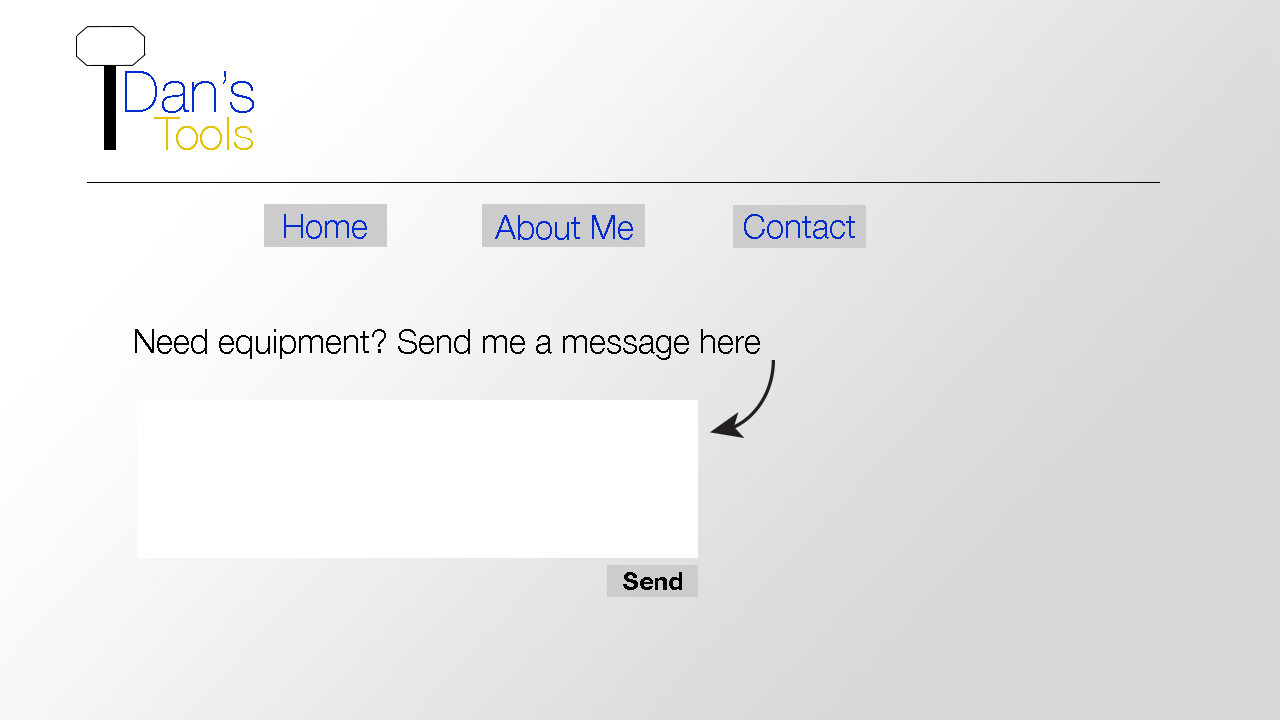
<style>
.page{position:relative;width:1280px;height:720px}
.page>*{position:absolute;margin:0}
.t1{font:58.3px "HelveticaNeue-Thin";color:#002cd2}
.t2{font:45.8px "HelveticaNeue-Thin";color:#e5c200}
.t3{font:33.3px "HelveticaNeue-Light";color:#002cd2}
.t4{font:33.3px "HelveticaNeue-Light";color:#000000}
.t5{font:25px "HelveticaNeue-Bold";color:#000000}
</style>
<div class="page">
<p class="t1" style="left:125px;top:71px;width:129px;height:42px">Dan’s</p>
<p class="t2" style="left:154px;top:117px;width:99px;height:33px">Tools</p>
<p class="t3" style="left:284px;top:214px;width:83px;height:25px">Home</p>
<p class="t3" style="left:495px;top:215px;width:138px;height:25px">About Me</p>
<p class="t3" style="left:744px;top:214px;width:111px;height:25px">Contact</p>
<p class="t4" style="left:135px;top:329px;width:625px;height:31px">Need equipment? Send me a message here</p>
<p class="t5" style="left:623px;top:572px;width:59px;height:18px">Send</p>
</div>
